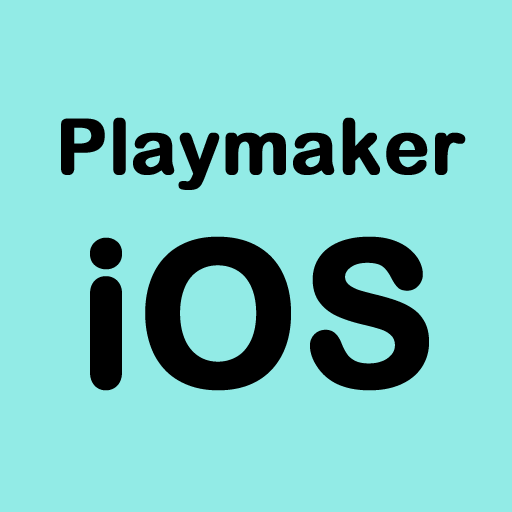
<style>
.page{position:relative;width:512px;height:512px;background:#92ebe6}
.page>*{position:absolute;margin:0}
.t1{font:76px "ArialRoundedMTBold";color:#000000;font-weight:bold}
.t2{font:200px "ArialRoundedMTBold";color:#000000;font-weight:bold}
</style>
<div class="page">
<p class="t1" style="left:61px;top:117px;width:405px;height:73px">Playmaker</p>
<p class="t2" style="left:90px;top:236px;width:339px;height:155px">iOS</p>
</div>
